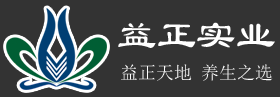
<style>
.page{position:relative;width:280px;height:97px;background:#333333}
.page>*{position:absolute;margin:0}
.t1{font:39.6px "LiSu";color:#ffffff}
.t2{font:18px "SimSun";color:#ffffff}
</style>
<div class="page">
<p class="t1" style="left:118px;top:22px;width:157px;height:26px">益正实业</p>
<p class="t2" style="left:121px;top:64px;width:152px;height:17px">益正天地 养生之选</p>
</div>
